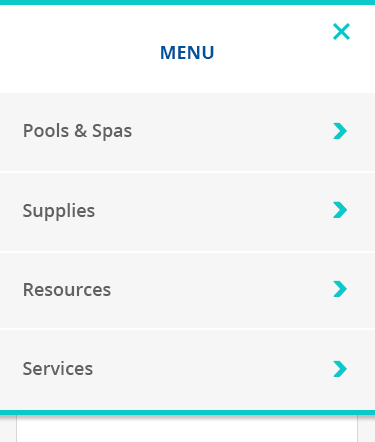
<style>
.page{position:relative;width:375px;height:442px;background:#f6f6f6}
.page>*{position:absolute;margin:0}
.t1{font:18px "OpenSans-Bold";color:#01529e}
.t2{font:18px "OpenSans-Semibold";color:#616161}
.t3{font:20px "SSPika";color:#0bc9c8}
</style>
<div class="page">
<p class="t1" style="left:161px;top:46px;width:53px;height:13px">MENU</p>
<p class="t2" style="left:24px;top:123px;width:108px;height:18px">Pools &amp; Spas</p>
<p class="t3" style="left:333px;top:122px;width:14px;height:17px">next</p>
<p class="t2" style="left:23px;top:203px;width:72px;height:18px">Supplies</p>
<p class="t3" style="left:333px;top:201px;width:14px;height:17px">next</p>
<p class="t3" style="left:333px;top:201px;width:14px;height:17px">next</p>
<p class="t3" style="left:333px;top:280px;width:14px;height:17px">next</p>
<p class="t2" style="left:24px;top:283px;width:87px;height:13px">Resources</p>
<p class="t2" style="left:23px;top:361px;width:70px;height:14px">Services</p>
<p class="t3" style="left:333px;top:360px;width:14px;height:17px">next</p>
</div>
